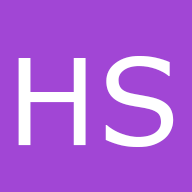
<style>
.page{position:relative;width:192px;height:192px;background:#a146d5}
.page>*{position:absolute;margin:0}
.t1{font:120px "Verdana";color:#ffffff}
</style>
<div class="page">
<p class="t1" style="left:18px;top:56px;width:156px;height:91px">HS</p>
</div>
